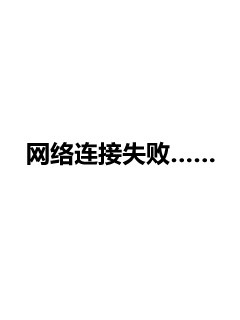
<style>
.page{position:relative;width:240px;height:320px;background:#ffffff}
.page>*{position:absolute;margin:0}
.t1{font:24px "MicrosoftYaHeiBold";color:#000000}
</style>
<div class="page">
<p class="t1" style="left:27px;top:141px;width:188px;height:25px">网络连接失败……</p>
</div>
